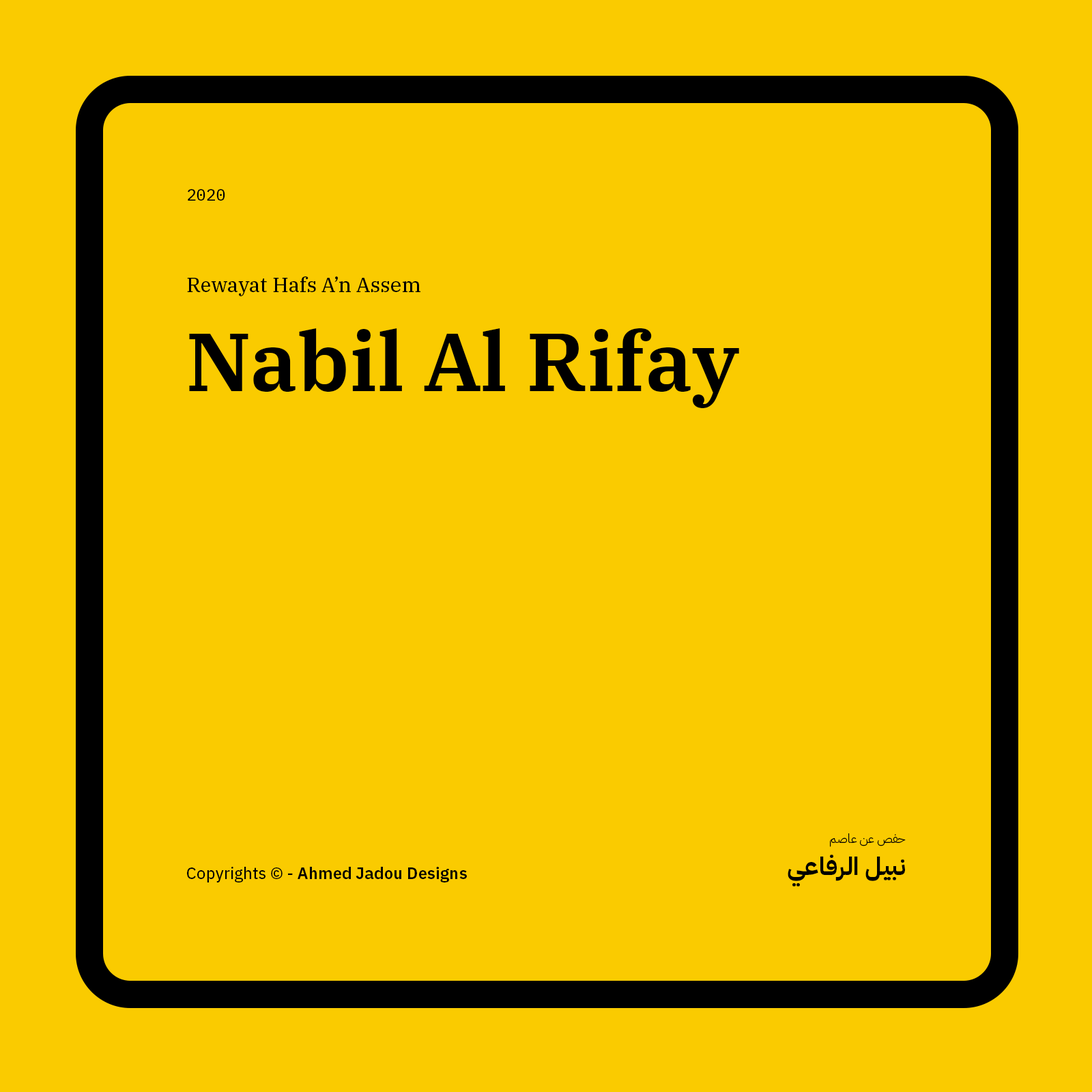
<style>
.page{position:relative;width:1092px;height:1092px;background:#facb00}
.page>*{position:absolute;margin:0}
.t1{font:16.4px "IBMPlexMono-Text";color:#000000}
.t2{font:20.5px "IBMPlexSerif-Text";color:#000000}
.t3{font:81.9px "IBMPlexSerif-SemiBold";color:#000000}
.t4{font:12.3px "IBMPlexArabic-Light";color:#000000}
.t5{font:24.6px "IBMPlexArabic-Bold";color:#000000}
.t6{font:16.4px "IBMPlexSans-SemiBold";color:#000000}
.t7{font:16.4px "IBMPlexSans-Text";color:#000000}
</style>
<div class="page">
<p class="t1" style="left:188px;top:189px;width:37px;height:12px">2020</p>
<p class="t2" style="left:187px;top:276px;width:233px;height:20px">Rewayat Hafs A’n Assem</p>
<p class="t3" style="left:189px;top:328px;width:550px;height:80px">Nabil Al Rifay</p>
<p class="t4" style="left:830px;top:833px;width:76px;height:14px">حفص عن عاصم</p>
<p class="t5" style="left:788px;top:854px;width:117px;height:33px">نبيل الرفاعي</p>
<p class="t6" style="left:187px;top:867px;width:280px;height:15px"><span class="t7">Copyrights © - </span>Ahmed Jadou Designs</p>
</div>
